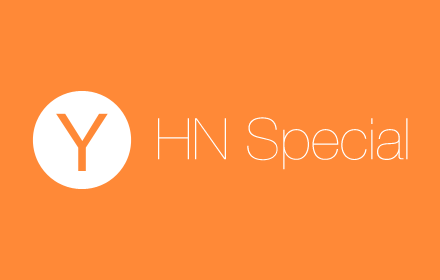
<style>
.page{position:relative;width:440px;height:280px;background:#ff8937}
.page>*{position:absolute;margin:0}
.t1{font:57.3px "HelveticaNeue-UltraLight";color:#ffffff}
</style>
<div class="page">
<p class="t1" style="left:158px;top:117px;width:250px;height:53px">HN Special</p>
</div>
